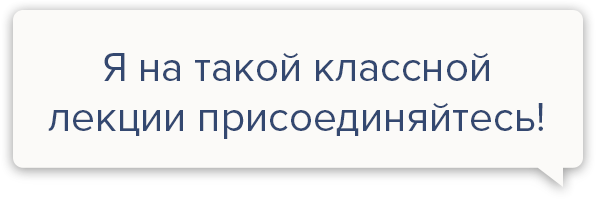
<style>
.page{position:relative;width:596px;height:199px;background:#fbfaf8}
.page>*{position:absolute;margin:0}
.t1{font:42px "ProximaNova-Regular";color:#344870}
</style>
<div class="page">
<p class="t1" style="left:48px;top:53px;width:495px;height:86px;text-align:center">Я на такой классной<br>лекции присоединяйтесь!</p>
</div>
